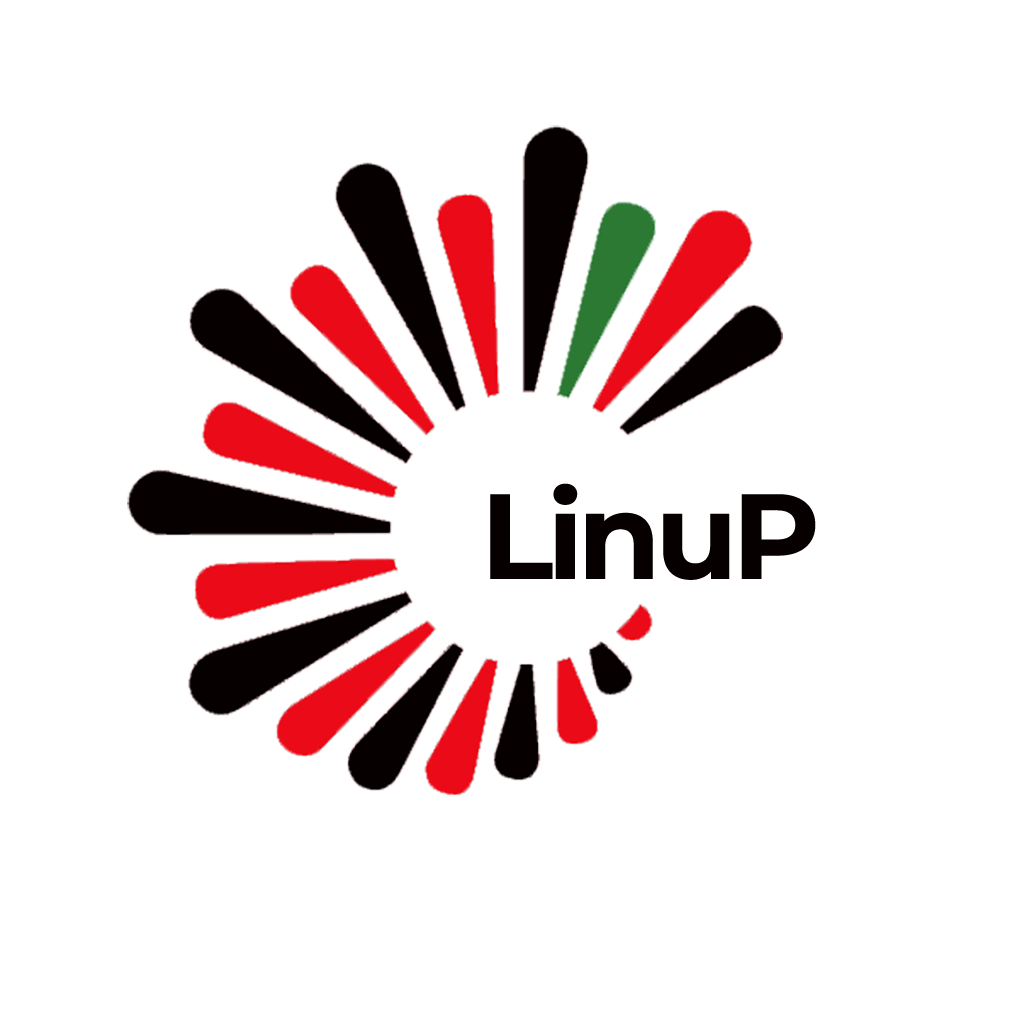
<style>
.page{position:relative;width:1024px;height:1029px;background:#ffffff}
.page>*{position:absolute;margin:0}
.t1{font:120.8px "Montserrat-Bold";letter-spacing:-0.05em;color:#070001}
</style>
<div class="page">
<p class="t1" style="left:490px;top:483px;width:326px;height:97px">LinuP</p>
</div>
